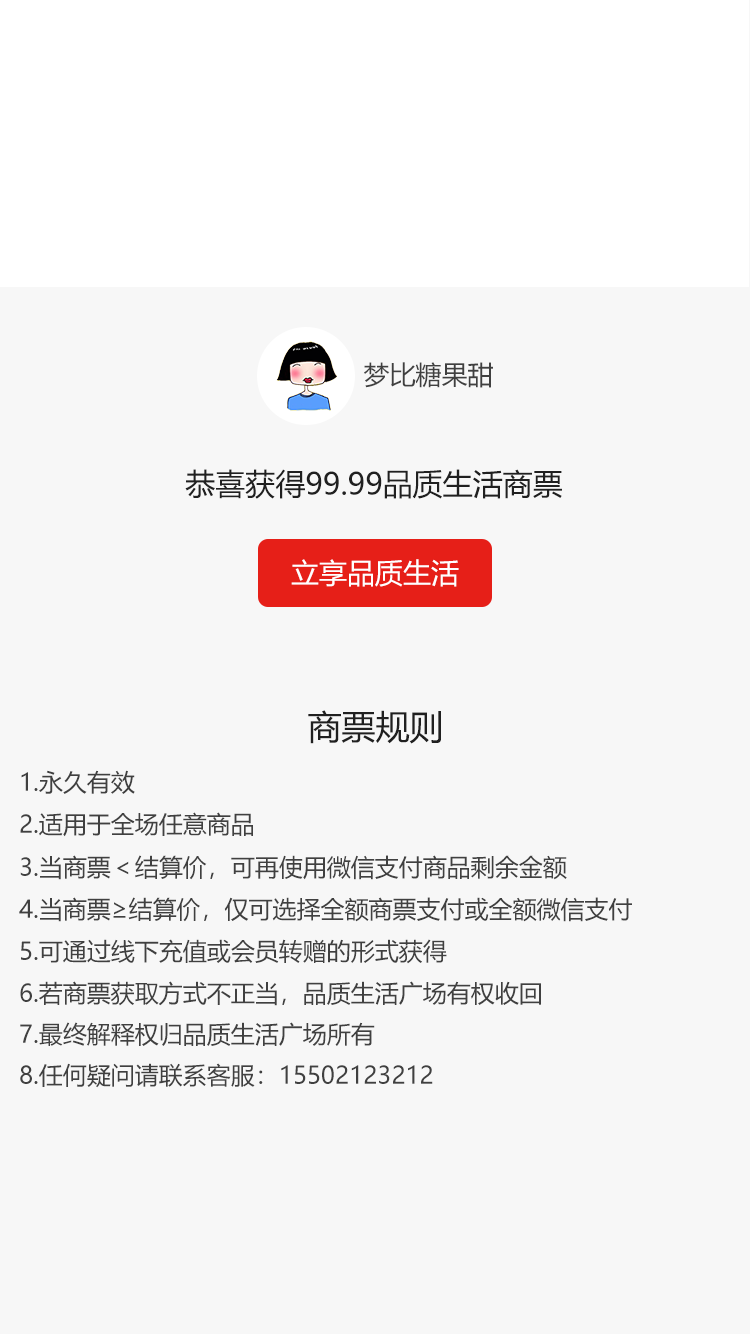
<style>
.page{position:relative;width:750px;height:1334px;background:#f7f7f7}
.page>*{position:absolute;margin:0}
.t1{font:26px "MicrosoftYaHei";color:#404040;text-transform:uppercase}
.t2{font:30px "MicrosoftYaHei";color:#202020;text-transform:uppercase}
.t3{font:28px "MicrosoftYaHei";color:#ffffff;text-transform:uppercase}
.t4{font:34px "MicrosoftYaHei";color:#202020;text-transform:uppercase}
.t5{font:24px "MicrosoftYaHei";color:#404040;text-transform:uppercase}
</style>
<div class="page">
<p class="t1" style="left:364px;top:362px;width:129px;height:26px">梦比糖果甜</p>
<p class="t2" style="left:185px;top:469px;width:377px;height:30px">恭喜获得99.99品质生活商票</p>
<p class="t3" style="left:291px;top:559px;width:168px;height:28px">立享品质生活</p>
<p class="t4" style="left:308px;top:710px;width:133px;height:34px">商票规则</p>
<p class="t5" style="left:21px;top:770px;width:114px;height:24px">1.永久有效</p>
<p class="t5" style="left:20px;top:812px;width:233px;height:25px">2.适用于全场任意商品</p>
<p class="t5" style="left:20px;top:855px;width:547px;height:25px">3.当商票＜结算价，可再使用微信支付商品剩余金额</p>
<p class="t5" style="left:19px;top:897px;width:613px;height:25px">4.当商票≥结算价，仅可选择全额商票支付或全额微信支付</p>
<p class="t5" style="left:21px;top:939px;width:426px;height:25px">5.可通过线下充值或会员转赠的形式获得</p>
<p class="t5" style="left:20px;top:981px;width:521px;height:25px">6.若商票获取方式不正当，品质生活广场有权收回</p>
<p class="t5" style="left:20px;top:1022px;width:355px;height:24px">7.最终解释权归品质生活广场所有</p>
<p class="t5" style="left:20px;top:1063px;width:413px;height:25px">8.任何疑问请联系客服：15502123212</p>
</div>
